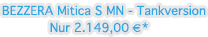
<style>
.page{position:relative;width:208px;height:37px;background:#ffffff}
.page>*{position:absolute;margin:0}
.t1{font:12px "Thonburi";color:#2ea7e5}
</style>
<div class="page">
<p class="t1" style="left:2px;top:5px;width:204px;height:11px">BEZZERA Mitica S MN - Tankversion</p>
<p class="t1" style="left:50px;top:22px;width:98px;height:13px">Nur 2.149,00 €*</p>
</div>
